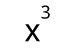
<style>
.page{position:relative;width:70px;height:55px;background:#ffffff}
.page>*{position:absolute;margin:0}
.t1{font:18px "DroidSans";color:#000000}
.t2{font:31.8px "DroidSans";color:#000000}
</style>
<div class="page">
<p class="t1" style="left:41px;top:5px;width:9px;height:14px">3</p>
<p class="t2" style="left:25px;top:24px;width:15px;height:18px">x</p>
</div>
